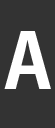
<style>
.page{position:relative;width:55px;height:128px;background:#333333}
.page>*{position:absolute;margin:0}
.t1{font:75px "AdobeGothicStd-Bold";color:#ffffff}
</style>
<div class="page">
<p class="t1" style="left:4px;top:31px;width:47px;height:58px">A</p>
</div>
